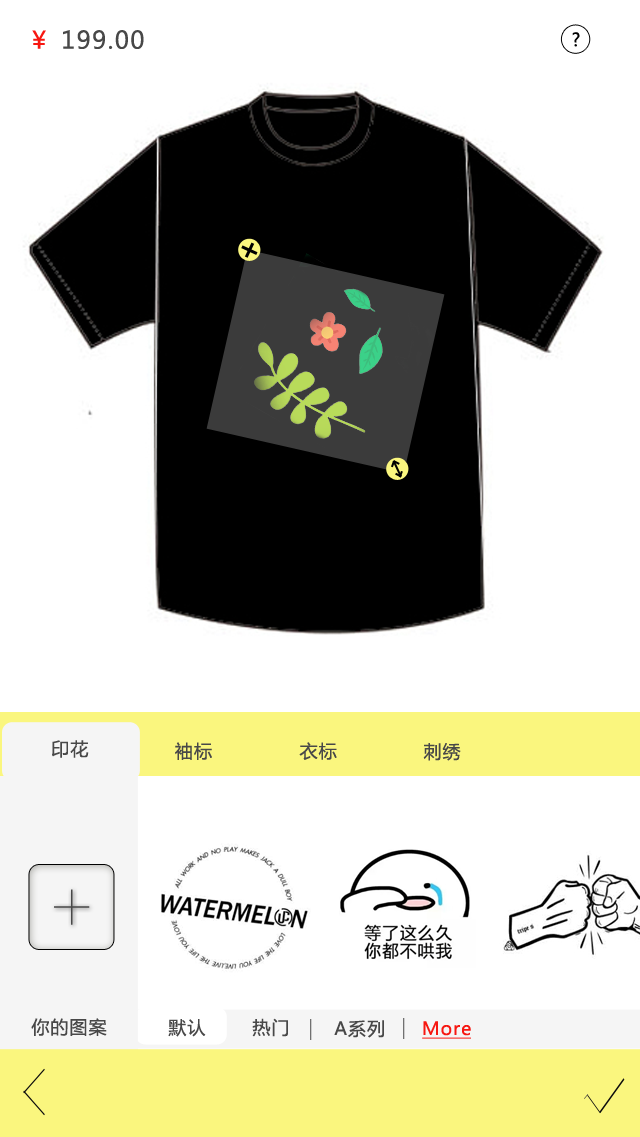
<style>
.page{position:relative;width:640px;height:1137px;background:#ffffff}
.page>*{position:absolute;margin:0}
.t1{font:24px "MicrosoftYaHei";letter-spacing:0.06em;color:#484848}
.t2{font:24px "MicrosoftYaHei";letter-spacing:0.06em;color:#f71711}
.t3{font:18px "MicrosoftYaHei";letter-spacing:0.06em;color:#000000}
.t4{font:18px "MicrosoftYaHei";letter-spacing:0.06em;color:#484848}
.t5{font:68.3px "FZLTCXHJW--GB1-0";letter-spacing:0.06em;color:#484848}
.t6{font:18px "MicrosoftYaHei";letter-spacing:0.06em;color:#f71711}
</style>
<div class="page">
<p class="t1" style="left:32px;top:30px;width:112px;height:19px"><span class="t2">￥</span> 199.00</p>
<p class="t3" style="left:572px;top:32px;width:8px;height:15px">?</p>
<p class="t4" style="left:52px;top:740px;width:37px;height:18px">印花</p>
<p class="t4" style="left:175px;top:742px;width:37px;height:18px">袖标</p>
<p class="t4" style="left:299px;top:742px;width:38px;height:18px">衣标</p>
<p class="t4" style="left:423px;top:743px;width:38px;height:18px">刺绣</p>
<p class="t5" style="left:54px;top:889px;width:36px;height:36px">+</p>
<p class="t4" style="left:31px;top:1018px;width:76px;height:18px">你的图案</p>
<p class="t4" style="left:168px;top:1019px;width:38px;height:18px">默认</p>
<p class="t4" style="left:252px;top:1018px;width:36px;height:19px">热门</p>
<p class="t4" style="left:334px;top:1020px;width:50px;height:18px">A系列</p>
<p class="t6" style="left:423px;top:1021px;width:48px;height:15px">More</p>
</div>
